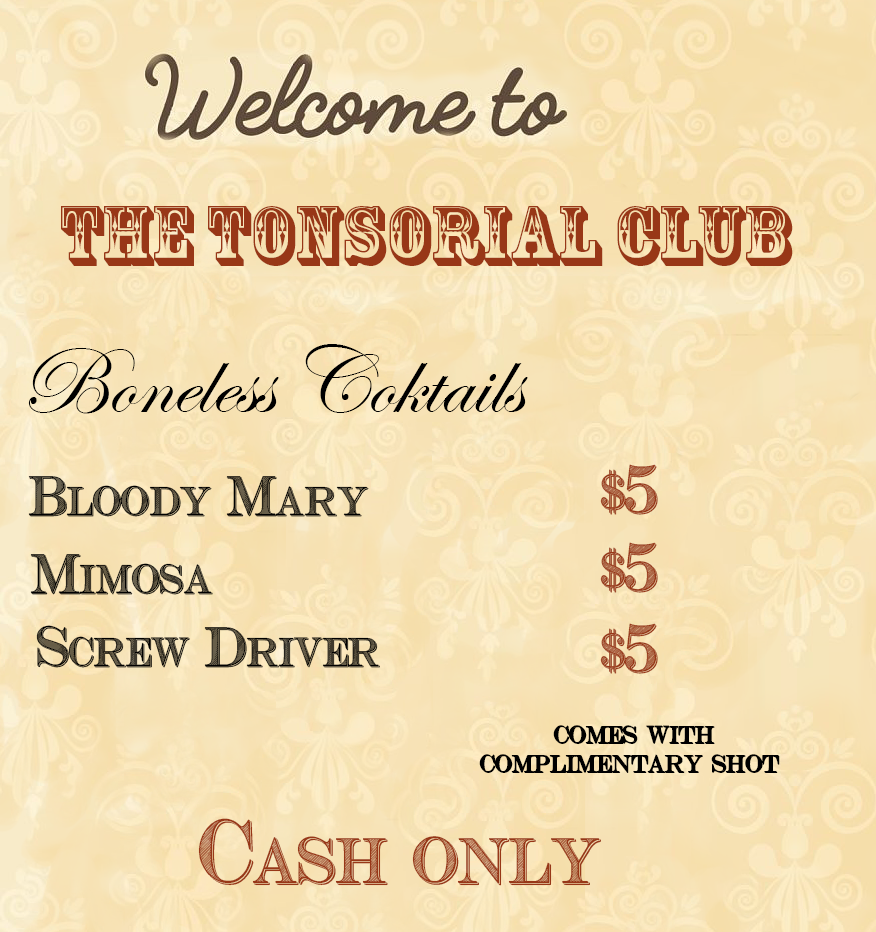
<style>
.page{position:relative;width:876px;height:932px}
.page>*{position:absolute;margin:0}
.t1{font:80px "RosewoodStd-Regular";color:#983717}
.t2{font:96px "EdwardianScriptITC";color:#000000}
.t3{font:47.9px "CashCurrency";color:#983717}
.t4{font:40px "CashCurrency";color:#000000}
.t5{font:24px "CashCurrency";color:#000000}
.t6{font:64px "CashCurrency";color:#983717}
</style>
<div class="page">
<p class="t1" style="left:61px;top:206px;width:732px;height:60px">The Tonsorial Club</p>
<p class="t2" style="left:28px;top:344px;width:500px;height:70px">Boneless Coktails</p>
<p class="t3" style="left:600px;top:464px;width:58px;height:51px">$5</p>
<p class="t4" style="left:28px;top:476px;width:341px;height:41px">Bloody Mary</p>
<p class="t3" style="left:600px;top:542px;width:58px;height:51px">$5</p>
<p class="t4" style="left:30px;top:554px;width:183px;height:41px">Mimosa</p>
<p class="t4" style="left:36px;top:625px;width:344px;height:43px">Screw Driver</p>
<p class="t3" style="left:600px;top:623px;width:58px;height:51px">$5</p>
<p class="t5" style="left:479px;top:725px;width:301px;height:48px;text-align:center">comes with <br>complimentary shot</p>
<p class="t6" style="left:198px;top:818px;width:403px;height:68px">Cash only</p>
</div>
